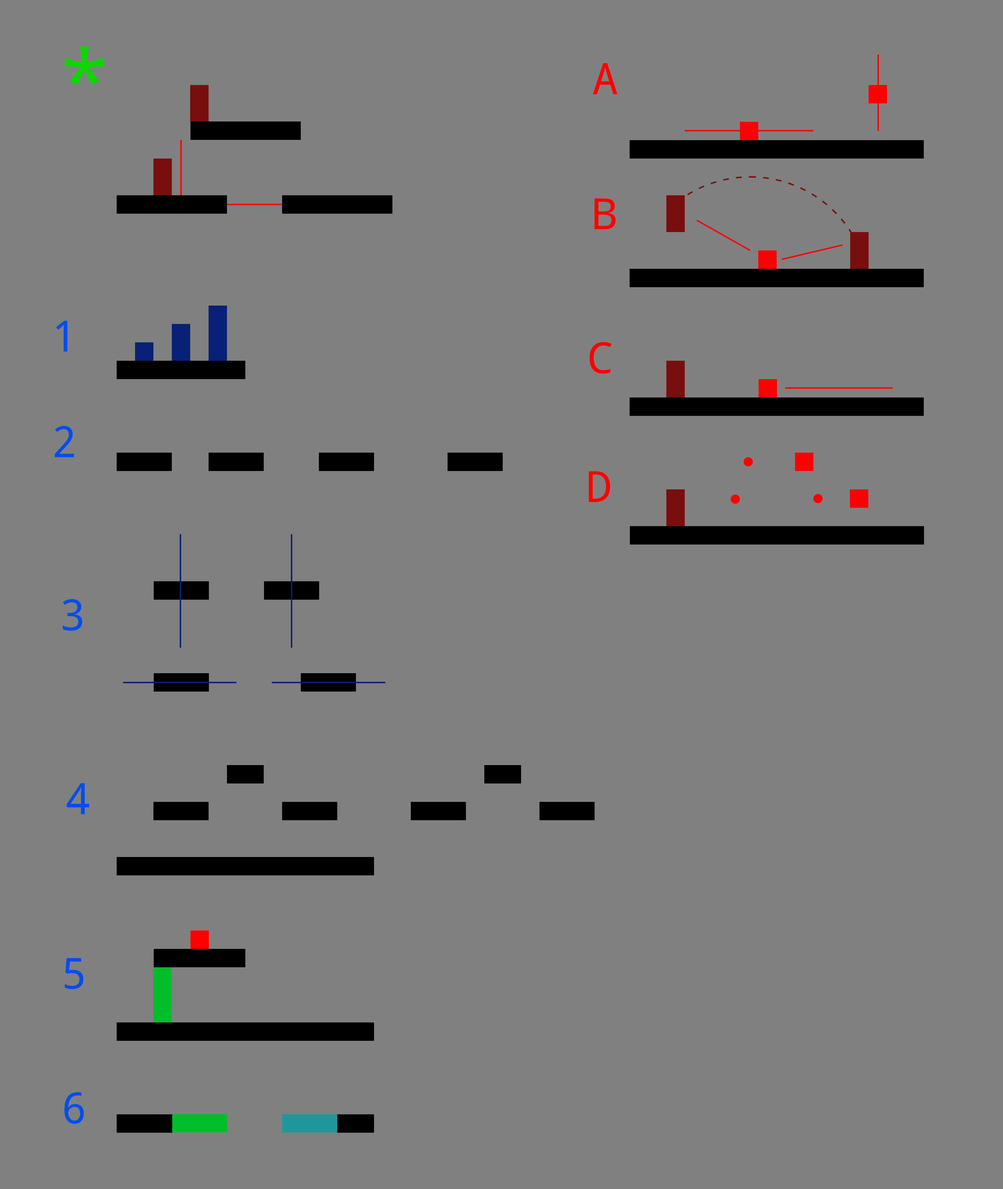
<style>
.page{position:relative;width:1003px;height:1189px;background:#808080}
.page>*{position:absolute;margin:0}
.t1{font:86.2px "NotoMono";letter-spacing:0.1em;color:#0fd500}
.t2{font:43.1px "NotoMono";letter-spacing:0.1em;color:#ff0000}
.t3{font:43.1px "NotoMono";letter-spacing:0.1em;color:#014eeb}
</style>
<div class="page">
<p class="t1" style="left:64px;top:46px;width:41px;height:39px">*</p>
<p class="t2" style="left:593px;top:63px;width:24px;height:31px">A</p>
<p class="t2" style="left:594px;top:198px;width:22px;height:31px">B</p>
<p class="t3" style="left:56px;top:321px;width:11px;height:31px">1</p>
<p class="t2" style="left:589px;top:342px;width:23px;height:32px">C</p>
<p class="t3" style="left:55px;top:426px;width:19px;height:31px">2</p>
<p class="t2" style="left:588px;top:471px;width:22px;height:31px">D</p>
<p class="t3" style="left:63px;top:599px;width:19px;height:32px">3</p>
<p class="t3" style="left:67px;top:783px;width:22px;height:31px">4</p>
<p class="t3" style="left:65px;top:958px;width:19px;height:31px">5</p>
<p class="t3" style="left:64px;top:1092px;width:20px;height:32px">6</p>
</div>
